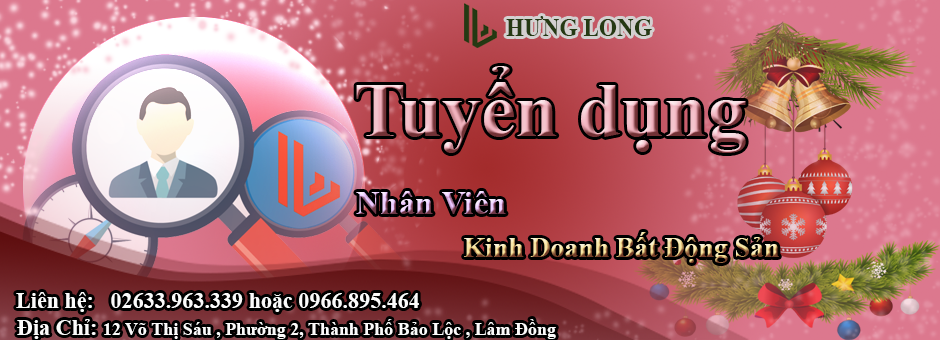
<style>
.page{position:relative;width:940px;height:340px}
.page>*{position:absolute;margin:0}
.t1{font:25.9px "TimesNewRomanPS-BoldMT";color:#253913;scale:0.9 1}
.t2{font:77.8px "TimesNewRomanPS-BoldMT"}
.t3{font:33.3px "TimesNewRomanPS-BoldMT"}
.t4{font:27.8px "TimesNewRomanPS-BoldMT"}
.t5{font:22.2px "TimesNewRomanPS-BoldMT";color:#fbfbfb}
.t6{font:18.1px "TimesNewRomanPS-BoldMT";color:#fbfbfb}
</style>
<div class="page">
<p class="t1" style="left:506px;top:16px;width:146px;height:20px">HƯNG LONG</p>
<p class="t2" style="left:356px;top:66px;width:390px;height:87px">Tuyển dụng</p>
<p class="t3" style="left:356px;top:191px;width:150px;height:23px">Nhân Viên</p>
<p class="t4" style="left:464px;top:232px;width:315px;height:31px">Kinh Doanh Bất Động Sản</p>
<p class="t5" style="left:16px;top:292px;width:403px;height:20px">Liên hệ:   02633.963.339 hoặc 0966.895.464</p>
<p class="t6" style="left:17px;top:319px;width:539px;height:20px"><span class="t5">Địa Chỉ: </span>12 Võ Thị Sáu , Phường 2, Thành Phố Bảo Lộc , Lâm Đồng</p>
</div>
